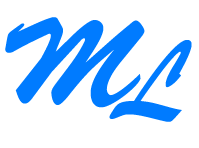
<style>
.page{position:relative;width:199px;height:148px;background:#ffffff}
.page>*{position:absolute;margin:0}
.t1{font:120px "BrushScriptStd";color:#007bff}
.t2{font:120px "BrushScriptMT";color:#007bff}
</style>
<div class="page">
<p class="t1" style="left:5px;top:17px;width:140px;height:91px">M</p>
<p class="t2" style="left:109px;top:40px;width:83px;height:82px">L</p>
</div>
